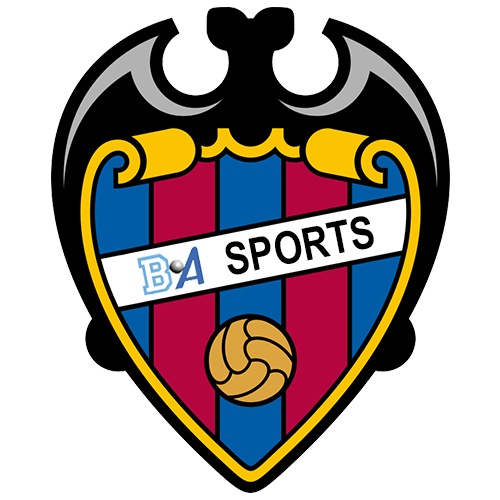
<style>
.page{position:relative;width:500px;height:500px;background:#ffffff}
.page>*{position:absolute;margin:0}
.t1{font:45px "ArialNarrow-Bold";color:#000000}
</style>
<div class="page">
<p class="t1" style="left:225px;top:216px;width:149px;height:59px;rotate:-11deg">SPORTS</p>
</div>
